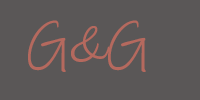
<style>
.page{position:relative;width:200px;height:100px;background:#5a5757}
.page>*{position:absolute;margin:0}
.t1{font:58.3px "InkFree";color:#b5695e}
</style>
<div class="page">
<p class="t1" style="left:28px;top:20px;width:118px;height:52px">G&amp;G</p>
</div>
